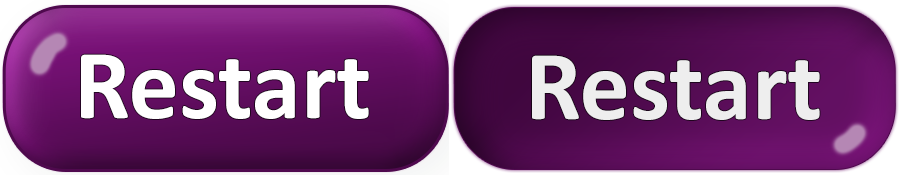
<style>
.page{position:relative;width:900px;height:176px}
.page>*{position:absolute;margin:0}
.t1{font:100px "Calibri-Bold";color:#ffffff}
.t2{font:100px "Calibri-Bold";color:#eeeeee}
</style>
<div class="page">
<p class="t1" style="left:81px;top:54px;width:288px;height:65px">Restart</p>
<p class="t2" style="left:532px;top:55px;width:288px;height:65px">Restart</p>
</div>
